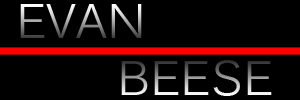
<style>
.page{position:relative;width:300px;height:100px;background:#000000}
.page>*{position:absolute;margin:0}
.t1{font:48px "Kalinga"}
</style>
<div class="page">
<p class="t1" style="left:20px;top:4px;width:252px;height:92px;text-align:center">EVAN <br>      BEESE</p>
</div>
